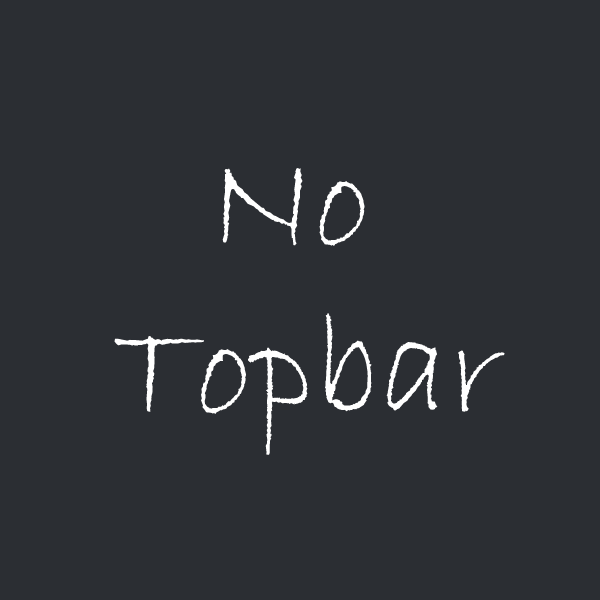
<style>
.page{position:relative;width:600px;height:600px;background:#2b2e33}
.page>*{position:absolute;margin:0}
.t1{font:140px "BradleyHandITC";color:#ffffff}
</style>
<div class="page">
<p class="t1" style="left:114px;top:168px;width:391px;height:287px;text-align:center">No <br>Topbar</p>
</div>
